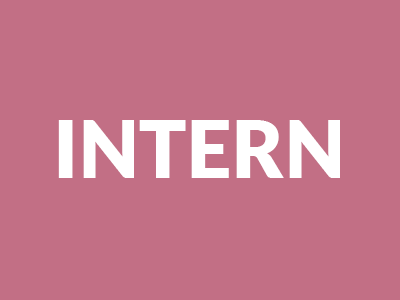
<style>
.page{position:relative;width:400px;height:300px;background:#c26f85}
.page>*{position:absolute;margin:0}
.t1{font:78.5px "Lato-Black";letter-spacing:0.01em;color:#ffffff}
</style>
<div class="page">
<p class="t1" style="left:58px;top:120px;width:282px;height:58px">INTERN</p>
</div>
